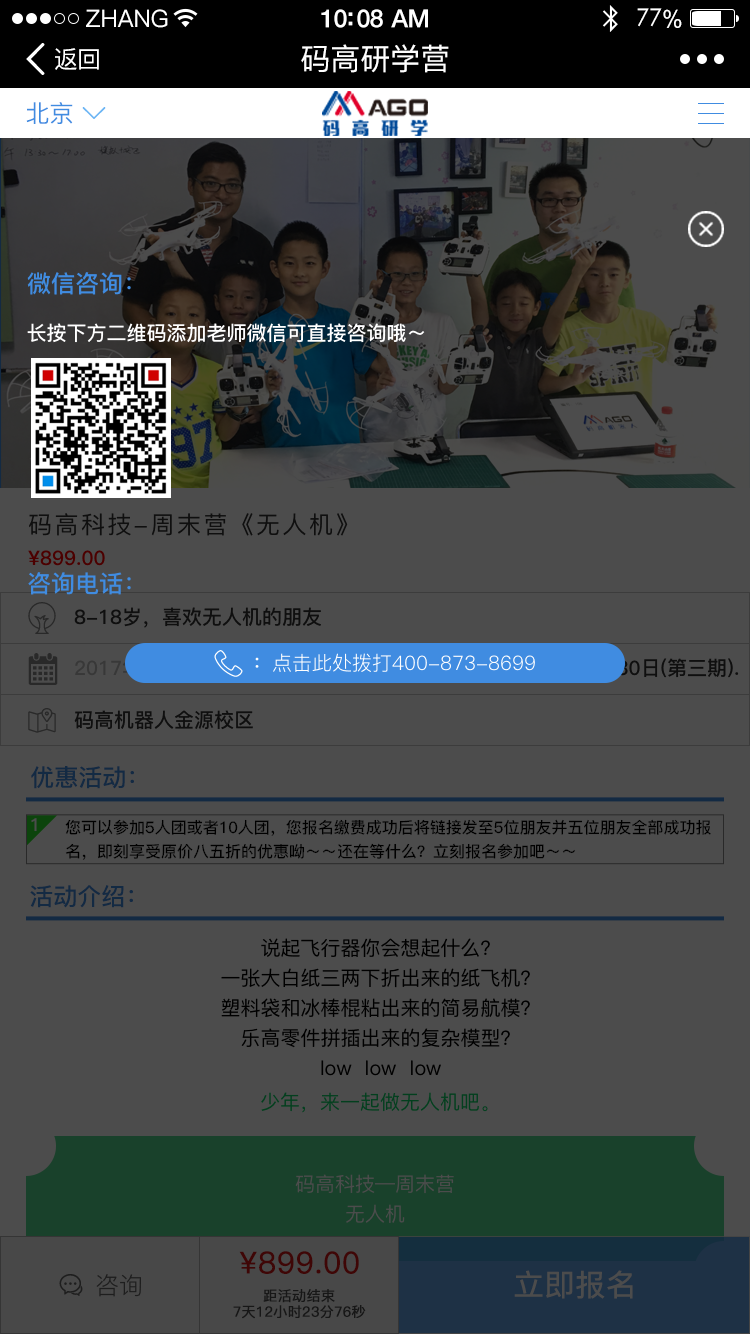
<style>
.page{position:relative;width:750px;height:1334px;background:#4c4c4c}
.page>*{position:absolute;margin:0}
.t1{font:24px "PingFang-SC-Medium";color:#ffffff}
.t2{font:25px "HelveticaNeue-Medium";letter-spacing:-0.02em;color:#ffffff}
.t3{font:24px "STXihei";letter-spacing:-0.02em;color:#ffffff}
.t4{font:24px "ArialUnicodeMS";letter-spacing:-0.02em;color:#ffffff}
.t5{font:24px "PingFang-SC-Medium";letter-spacing:-0.02em;color:#ffffff}
.t6{font:30px "PingFang-SC-Medium";color:#ffffff}
.t7{font:24px "PingFang-SC-Medium";color:#408ce1}
.t8{font:24px "PingFang-SC-Bold";color:#408ce1}
.t9{font:20px "PingFang-SC-Bold";color:#ffffff}
.t10{font:24px/31.7px "PingFang-SC-Medium";letter-spacing:0.1em;color:#0f0f0f}
.t11{font:20px/32px "PingFang-SC-Bold";color:#0f0f0f}
.t12{font:20px "PingFang-SC-Bold";color:#0f0f0f}
.t13{font:20px "PingFang-SC-Regular";color:#ffffff}
.t14{font:23.9px "PingFang-SC-Bold";color:#132a43}
.t15{font:17.9px "PingFang-SC-Bold";color:#4c4c4c}
.t16{font:16px/23.9px "PingFang-SC-Bold";color:#000000}
.t17{font:20px/30px "PingFang-SC-Medium";color:#000000}
.t18{font:20px "PingFang-SC-Medium";color:#033f1e}
.t19{font:20px/30px "PingFang-SC-Medium";color:#4c4c4c}
.t20{font:30px "PingFang-SC-Medium";color:#3f0606;font-weight:bold}
.t21{font:24px "PingFang-SC-Regular";color:#1e1e1e}
.t22{font:30px "PingFang-SC-Medium";color:#4c4c4c;font-weight:bold}
.t23{font:14px/16px "PingFang-SC-Medium";color:#171717;font-weight:bold}
</style>
<div class="page">
<p class="t1" style="left:86px;top:9px;width:82px;height:19px">ZHANG</p>
<p class="t2" style="left:321px;top:9px;width:107px;height:19px">10:08 AM</p>
<p class="t3" style="left:637px;top:8px;width:45px;height:20px">77<span class="t4">%</span></p>
<p class="t5" style="left:55px;top:48px;width:44px;height:22px">返回</p>
<p class="t6" style="left:301px;top:44px;width:148px;height:29px">码高研学营</p>
<p class="t7" style="left:26px;top:102px;width:47px;height:22px">北京</p>
<p class="t8" style="left:27px;top:272px;width:104px;height:23px">微信咨询：</p>
<p class="t9" style="left:27px;top:323px;width:398px;height:20px">长按下方二维码添加老师微信可直接咨询哦～</p>
<p class="t10" style="left:28px;top:513px;width:320px;height:53px">码高科技-周末营《无人机》<br><span class="t11">¥899.00</span></p>
<p class="t8" style="left:28px;top:572px;width:103px;height:23px">咨询电话：</p>
<p class="t12" style="left:74px;top:607px;width:247px;height:21px">8-18岁，喜欢无人机的朋友</p>
<p class="t13" style="left:255px;top:653px;width:280px;height:19px"><span class="t9">：</span>点击此处拨打400-873-8699</p>
<p class="t12" style="left:74px;top:710px;width:179px;height:20px">码高机器人金源校区</p>
<p class="t14" style="left:31px;top:766px;width:103px;height:23px">优惠活动：</p>
<p class="t15" style="left:31px;top:818px;width:6px;height:14px">1</p>
<p class="t16" style="left:65px;top:819px;width:646px;height:41px;text-align:justify">您可以参加5人团或者10人团，您报名缴费成功后将链接发至5位朋友并五位朋友全部成功报<br>名，即刻享受原价八五折的优惠呦～～还在等什么？立刻报名参加吧～～</p>
<p class="t14" style="left:30px;top:885px;width:103px;height:23px">活动介绍：</p>
<p class="t17" style="left:221px;top:938px;width:309px;height:138px;text-align:center">说起飞行器你会想起什么？<br>一张大白纸三两下折出来的纸飞机？<br>塑料袋和冰棒棍粘出来的简易航模？<br>乐高零件拼插出来的复杂模型？<br>low  low  low</p>
<p class="t18" style="left:261px;top:1092px;width:227px;height:21px">少年，来一起做无人机吧。</p>
<p class="t19" style="left:295px;top:1174px;width:159px;height:49px;text-align:center">码高科技—周末营<br>无人机</p>
<p class="t20" style="left:239px;top:1251px;width:120px;height:23px">¥899.00</p>
<p class="t21" style="left:96px;top:1274px;width:45px;height:23px">咨询</p>
<p class="t22" style="left:514px;top:1270px;width:119px;height:29px">立即报名</p>
<p class="t23" style="left:233px;top:1289px;width:133px;height:30px;text-align:center">距活动结束<br>7天12小时23分76秒</p>
</div>
